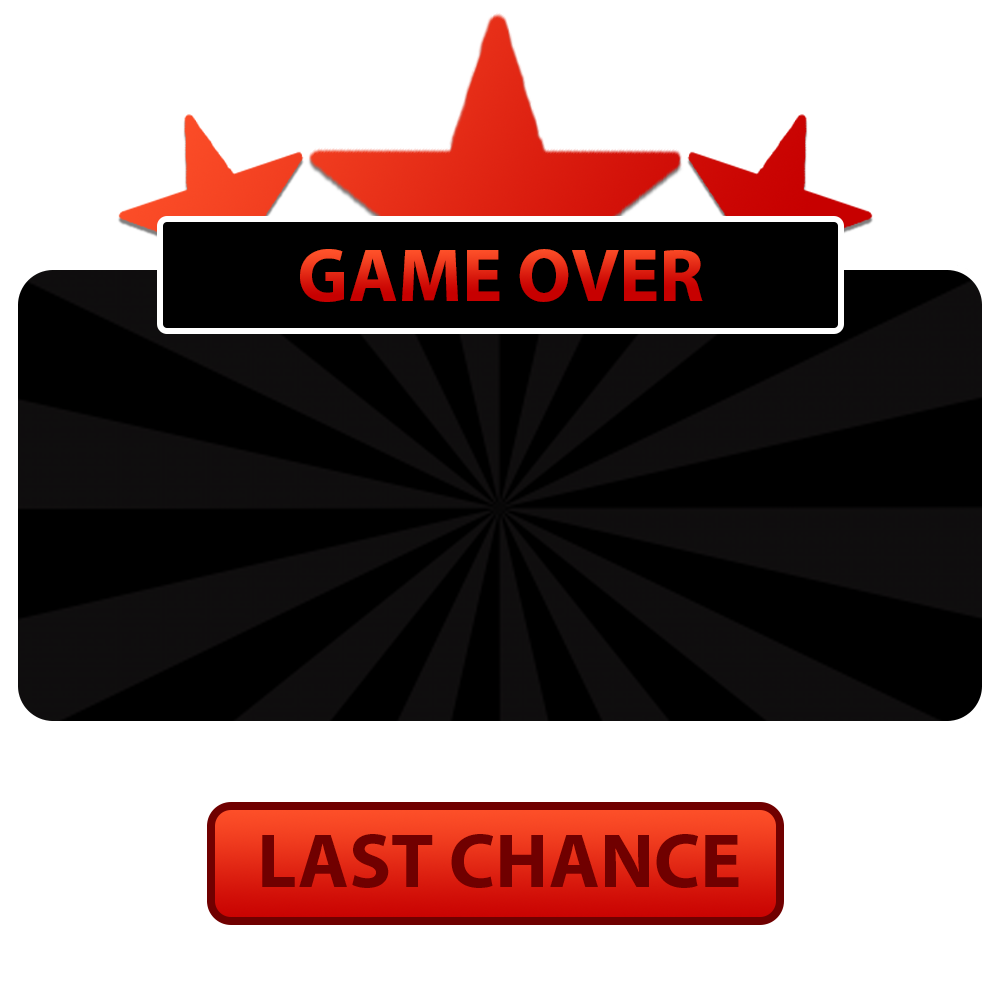
<style>
.page{position:relative;width:1000px;height:1000px;background:#ffffff}
.page>*{position:absolute;margin:0}
.t1{font:75.4px "MyriadPro-Bold"}
.t2{font:77.8px "MyriadPro-Bold";color:#700000}
</style>
<div class="page">
<p class="t1" style="left:300px;top:249px;width:403px;height:53px">GAME OVER</p>
<p class="t2" style="left:262px;top:834px;width:477px;height:54px">LAST CHANCE</p>
</div>
